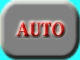
<style>
.page{position:relative;width:80px;height:60px;background:#808080}
.page>*{position:absolute;margin:0}
.t1{font:18px "MyungjoXB-HM"}
</style>
<div class="page">
<p class="t1" style="left:16px;top:22px;width:48px;height:14px">AUTO</p>
</div>
